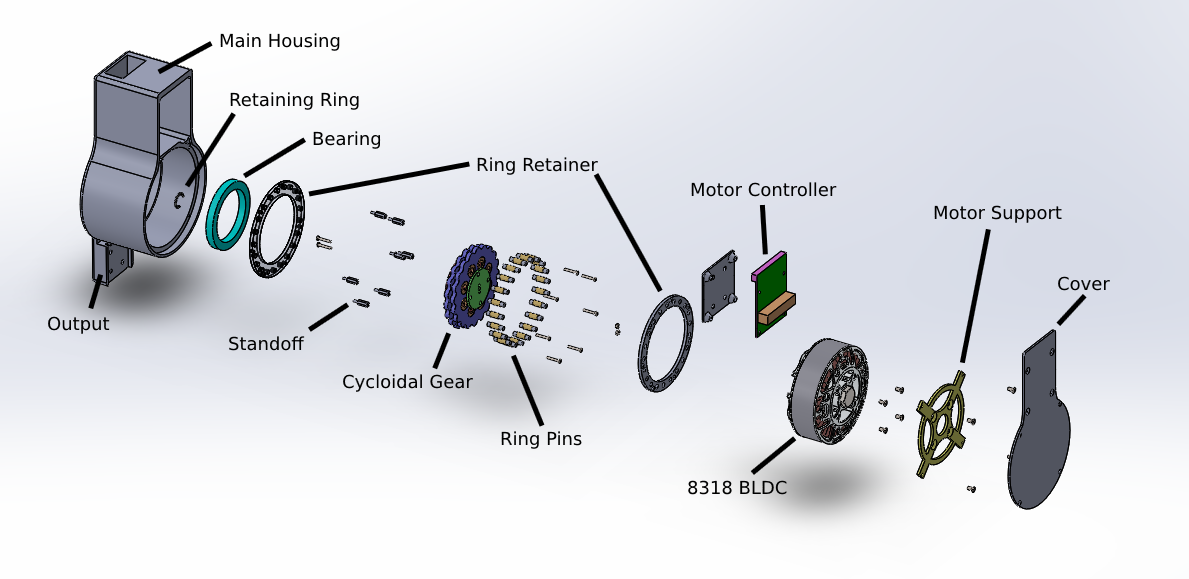
<style>
.page{position:relative;width:1189px;height:579px}
.page>*{position:absolute;margin:0}
.t1{font:18px "DejaVuSans";color:#000000}
</style>
<div class="page">
<p class="t1" style="left:220px;top:33px;width:120px;height:18px">Main Housing</p>
<p class="t1" style="left:230px;top:92px;width:129px;height:18px">Retaining Ring</p>
<p class="t1" style="left:313px;top:131px;width:68px;height:18px">Bearing</p>
<p class="t1" style="left:477px;top:157px;width:121px;height:18px">Ring Retainer</p>
<p class="t1" style="left:691px;top:182px;width:146px;height:15px">Motor Controller</p>
<p class="t1" style="left:934px;top:205px;width:128px;height:18px">Motor Support</p>
<p class="t1" style="left:1058px;top:276px;width:52px;height:15px">Cover</p>
<p class="t1" style="left:48px;top:316px;width:62px;height:18px">Output</p>
<p class="t1" style="left:229px;top:336px;width:76px;height:15px">Standoff</p>
<p class="t1" style="left:343px;top:374px;width:130px;height:18px">Cycloidal Gear</p>
<p class="t1" style="left:501px;top:431px;width:81px;height:18px">Ring Pins</p>
<p class="t1" style="left:688px;top:480px;width:99px;height:15px">8318 BLDC</p>
</div>
